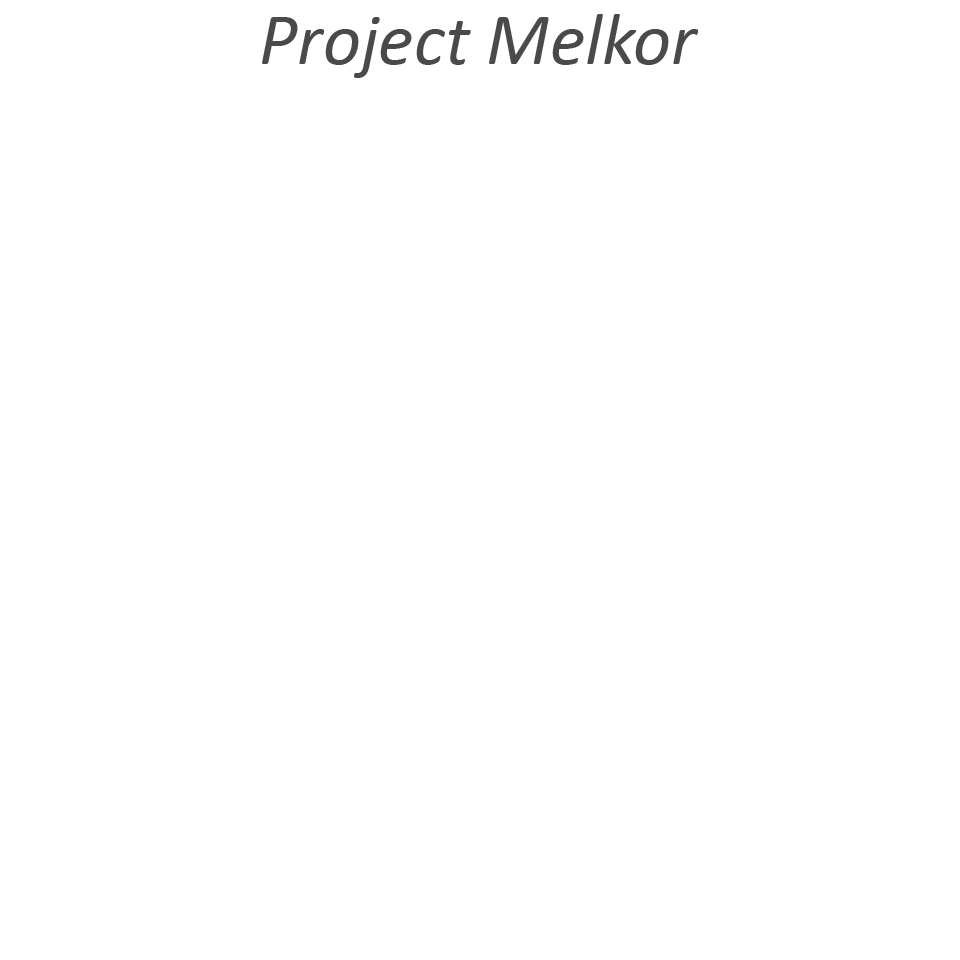
<style>
.page{position:relative;width:960px;height:960px;background:#ffffff}
.page>*{position:absolute;margin:0}
.t1{font:74.1px "Calibri-Italic";color:#4a4a4a}
</style>
<div class="page">
<p class="t1" style="left:262px;top:14px;width:437px;height:64px">Project Melkor</p>
</div>
